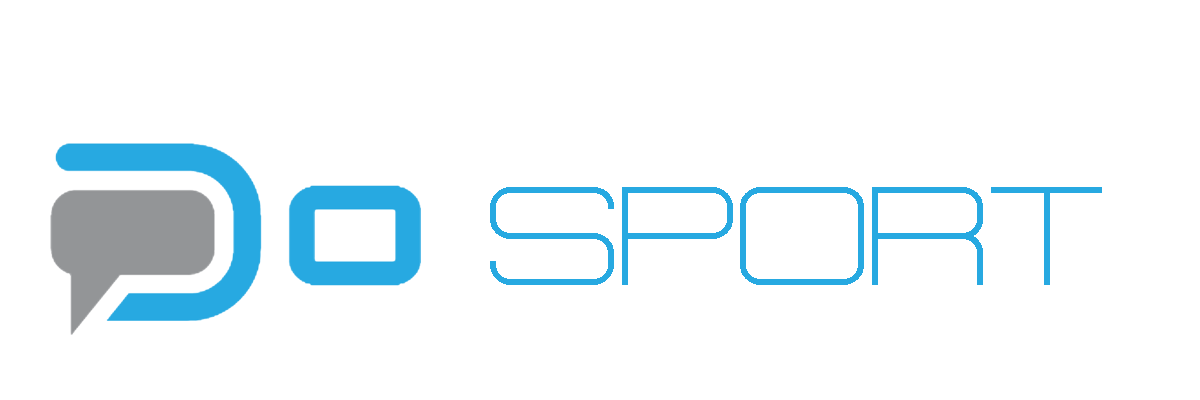
<style>
.page{position:relative;width:1200px;height:400px;background:#ffffff}
.page>*{position:absolute;margin:0}
.t1{font:124px "BOLDfinger";color:#27a9e1}
.t2{font:122px "BOLDfinger";color:#27a9e1}
</style>
<div class="page">
<p class="t1" style="left:490px;top:187px;width:612px;height:98px">sport<span class="t2">s</span></p>
</div>
